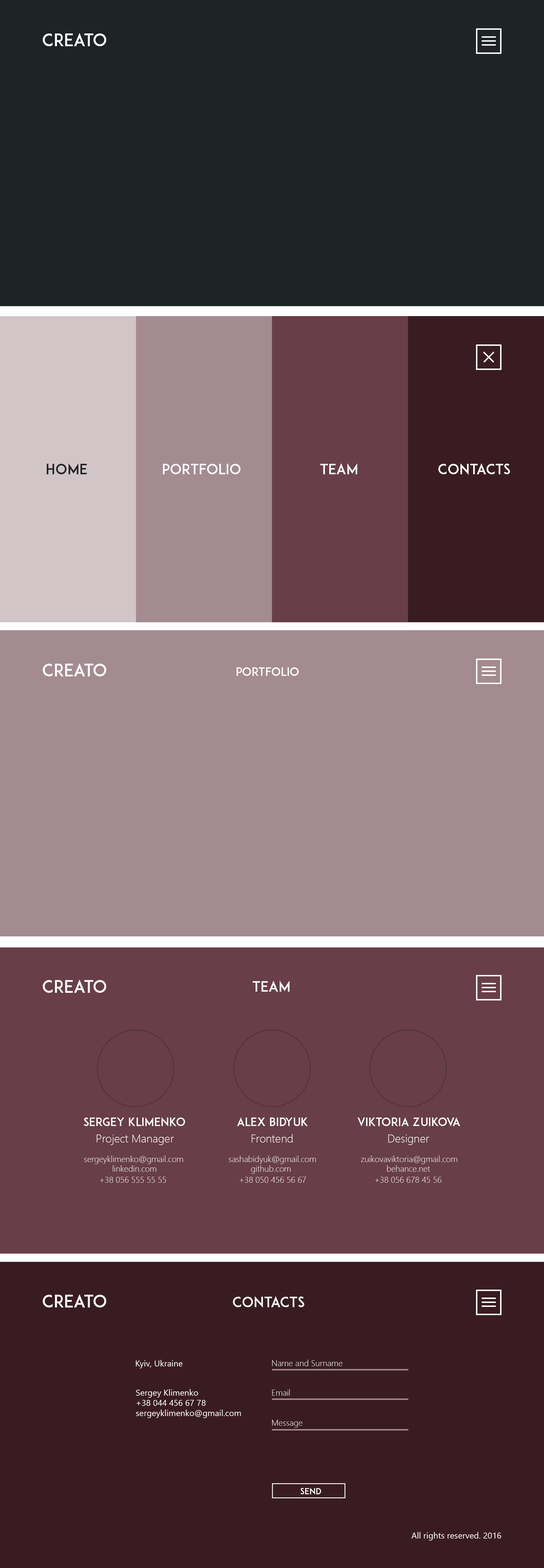
<style>
.page{position:relative;width:544px;height:1568px;background:#a48b91}
.page>*{position:absolute;margin:0}
.t1{font:17px "ADAM.CGPRO";color:#ffffff}
.t2{font:14.2px "ADAM.CGPRO";color:#1e2326}
.t3{font:14.2px "ADAM.CGPRO";color:#ffffff}
.t4{font:11.3px "ADAM.CGPRO";color:#ffffff}
.t5{font:11.3px "SegoeUI-Light";color:#ffffff}
.t6{font:8.5px "SegoeUI-Light";color:#ffffff}
.t7{font:8.5px "SegoeUI";color:#ffffff}
.t8{font:8.5px "ADAM.CGPRO";color:#ffffff}
</style>
<div class="page">
<p class="t1" style="left:43px;top:33px;width:63px;height:13px">CREATO</p>
<p class="t2" style="left:47px;top:463px;width:40px;height:11px">home</p>
<p class="t3" style="left:163px;top:464px;width:78px;height:10px">PORTFOLIO</p>
<p class="t3" style="left:320px;top:463px;width:37px;height:11px">team</p>
<p class="t3" style="left:439px;top:463px;width:71px;height:12px">Contacts</p>
<p class="t1" style="left:43px;top:663px;width:63px;height:13px">CREATO</p>
<p class="t4" style="left:237px;top:667px;width:62px;height:9px">PORTFOLIO</p>
<p class="t1" style="left:43px;top:979px;width:63px;height:14px">CREATO</p>
<p class="t3" style="left:253px;top:981px;width:37px;height:11px">TEAM</p>
<p class="t4" style="left:84px;top:1117px;width:101px;height:10px">sergey klimenko</p>
<p class="t4" style="left:237px;top:1117px;width:71px;height:9px">Alex bidyuk</p>
<p class="t4" style="left:358px;top:1117px;width:102px;height:9px">viktoria zuikova</p>
<p class="t5" style="left:252px;top:1134px;width:41px;height:8px">Frontend</p>
<p class="t5" style="left:97px;top:1135px;width:77px;height:10px">Project Manager</p>
<p class="t5" style="left:388px;top:1135px;width:41px;height:10px">Designer</p>
<p class="t6" style="left:84px;top:1156px;width:99px;height:8px">sergeyklimenko@gmail.com</p>
<p class="t6" style="left:229px;top:1156px;width:87px;height:8px">sashabidyuk@gmail.com</p>
<p class="t6" style="left:361px;top:1156px;width:97px;height:8px">zuikovaviktoria@gmail.com</p>
<p class="t6" style="left:113px;top:1165px;width:43px;height:7px">linkedin.com</p>
<p class="t6" style="left:251px;top:1165px;width:40px;height:9px">github.com</p>
<p class="t6" style="left:387px;top:1165px;width:43px;height:7px">behance.net</p>
<p class="t6" style="left:100px;top:1177px;width:66px;height:6px">+38 056 555 55 55</p>
<p class="t6" style="left:240px;top:1177px;width:66px;height:6px">+38 050 456 56 67</p>
<p class="t6" style="left:375px;top:1177px;width:67px;height:6px">+38 056 678 45 56</p>
<p class="t1" style="left:43px;top:1294px;width:63px;height:13px">CREATO</p>
<p class="t3" style="left:233px;top:1296px;width:71px;height:12px">CONTACTS</p>
<p class="t7" style="left:136px;top:1360px;width:47px;height:8px">Kyiv, Ukraine</p>
<p class="t6" style="left:272px;top:1360px;width:71px;height:6px">Name and Surname</p>
<p class="t7" style="left:136px;top:1389px;width:105px;height:29px">Sergey Klimenko<br>+38 044 456 67 78<br>sergeyklimenko@gmail.com</p>
<p class="t6" style="left:272px;top:1389px;width:18px;height:7px">Email</p>
<p class="t6" style="left:272px;top:1420px;width:30px;height:8px">Message</p>
<p class="t8" style="left:301px;top:1488px;width:20px;height:7px">SEND</p>
<p class="t7" style="left:412px;top:1532px;width:89px;height:9px">All rights reserved. 2016</p>
</div>
